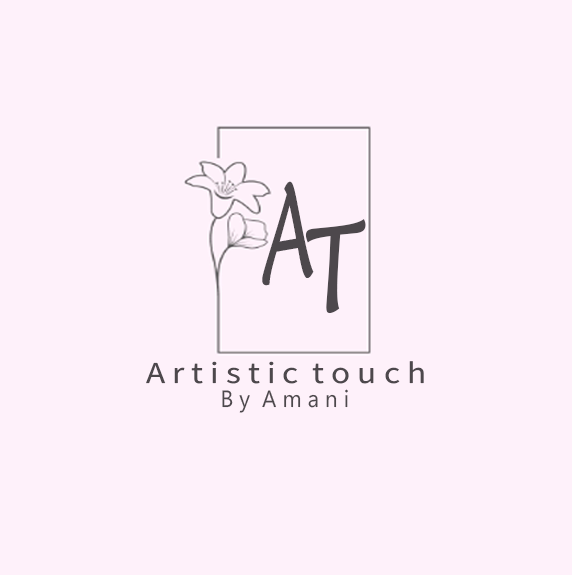
<style>
.page{position:relative;width:572px;height:575px;background:#fef1fa}
.page>*{position:absolute;margin:0}
.t1{font:139.3px "MaiandraGD-Regular";color:#4d484c;font-style:italic;scale:0.59 1}
.t2{font:123.6px "MaiandraGD-Regular";color:#4d484c;font-style:italic;scale:0.83 1}
.t3{font:30.5px "SourceSansRoman-Regular";color:#4d484c;font-style:italic;scale:1.15 1}
.t4{font:30.5px "MaiandraGD-Regular";color:#4d484c;font-style:italic;scale:1.15 1}
.t5{font:23.4px "SegoeUIVariable";color:#4d484c;font-style:italic;scale:0.95 1}
</style>
<div class="page">
<p class="t1" style="left:262px;top:181px;width:52px;height:105px;rotate:-10deg">A</p>
<p class="t2" style="left:305px;top:219px;width:61px;height:95px;rotate:-8deg">T</p>
<p class="t3" style="left:146px;top:361px;width:278px;height:23px"><span class="t4"><br></span>A r t i s t i c  t o u c h</p>
<p class="t5" style="left:222px;top:389px;width:126px;height:24px">B y  A m a n i</p>
</div>
